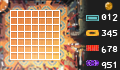
<style>
.page{position:relative;width:120px;height:70px}
.page>*{position:absolute;margin:0}
.t1{font:10px/16px "3270NerdFontComplete-Regular";color:#ffffff}
</style>
<div class="page">
<p class="t1" style="left:101px;top:13px;width:17px;height:56px">012<br>345<br>678<br>951</p>
</div>
